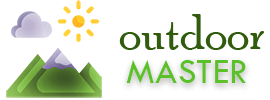
<style>
.page{position:relative;width:270px;height:100px;background:#ffffff}
.page>*{position:absolute;margin:0}
.t1{font:50px "PoorRichard-Regular";color:#315c0e}
.t2{font:37.5px "TwCenMT-Regular";color:#5bc029}
</style>
<div class="page">
<p class="t1" style="left:119px;top:14px;width:145px;height:36px">outdoor</p>
<p class="t2" style="left:126px;top:60px;width:120px;height:23px">MASTER</p>
</div>
